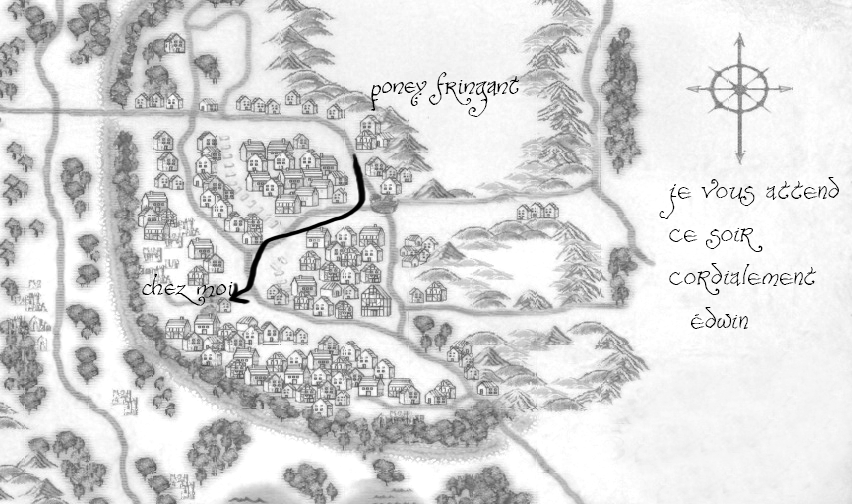
<style>
.page{position:relative;width:852px;height:504px}
.page>*{position:absolute;margin:0}
.t1{font:36px "Bilbo-hand-Bold-Bold";letter-spacing:0.025em;color:#000000}
.t2{font:36px "Bilbo-handRegular";letter-spacing:0.025em;color:#000000}
.t3{font:36px/11px "Bilbo-handRegular";letter-spacing:0.025em;color:#000000}
</style>
<div class="page">
<p class="t1" style="left:371px;top:72px;width:149px;height:45px">poney fringant</p>
<p class="t2" style="left:659px;top:177px;width:180px;height:152px"><span class="t3">je vous attend <br></span>ce soir<br>cordialement<br>  Edwin</p>
<p class="t1" style="left:142px;top:274px;width:92px;height:32px">chez moi</p>
</div>
